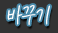
<style>
.page{position:relative;width:58px;height:33px;background:#333333}
.page>*{position:absolute;margin:0}
.t1{font:27px "KCC-eunyoung-Regular";color:#ffffff}
</style>
<div class="page">
<p class="t1" style="left:7px;top:5px;width:43px;height:20px">바꾸기</p>
</div>
